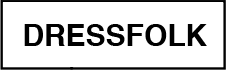
<style>
.page{position:relative;width:226px;height:70px;background:#ffffff}
.page>*{position:absolute;margin:0}
.t1{font:30px "Helvetica-Bold";color:#000000}
</style>
<div class="page">
<p class="t1" style="left:24px;top:24px;width:183px;height:22px">DRESSFOLK</p>
</div>
